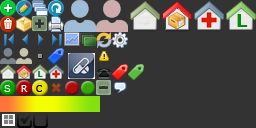
<style>
.page{position:relative;width:256px;height:128px;background:#333333}
.page>*{position:absolute;margin:0}
.t1{font:10px "ArialMT";letter-spacing:0.1em;color:#ffffff}
.t2{font:10px "Tahoma";letter-spacing:0.1em;color:#ffffff}
.t3{font:10px "Tahoma";letter-spacing:0.1em;color:#000000}
</style>
<div class="page">
<p class="t1" style="left:4px;top:85px;width:7px;height:7px">S</p>
<p class="t2" style="left:21px;top:85px;width:7px;height:7px">R</p>
<p class="t3" style="left:36px;top:85px;width:6px;height:7px">C</p>
</div>
